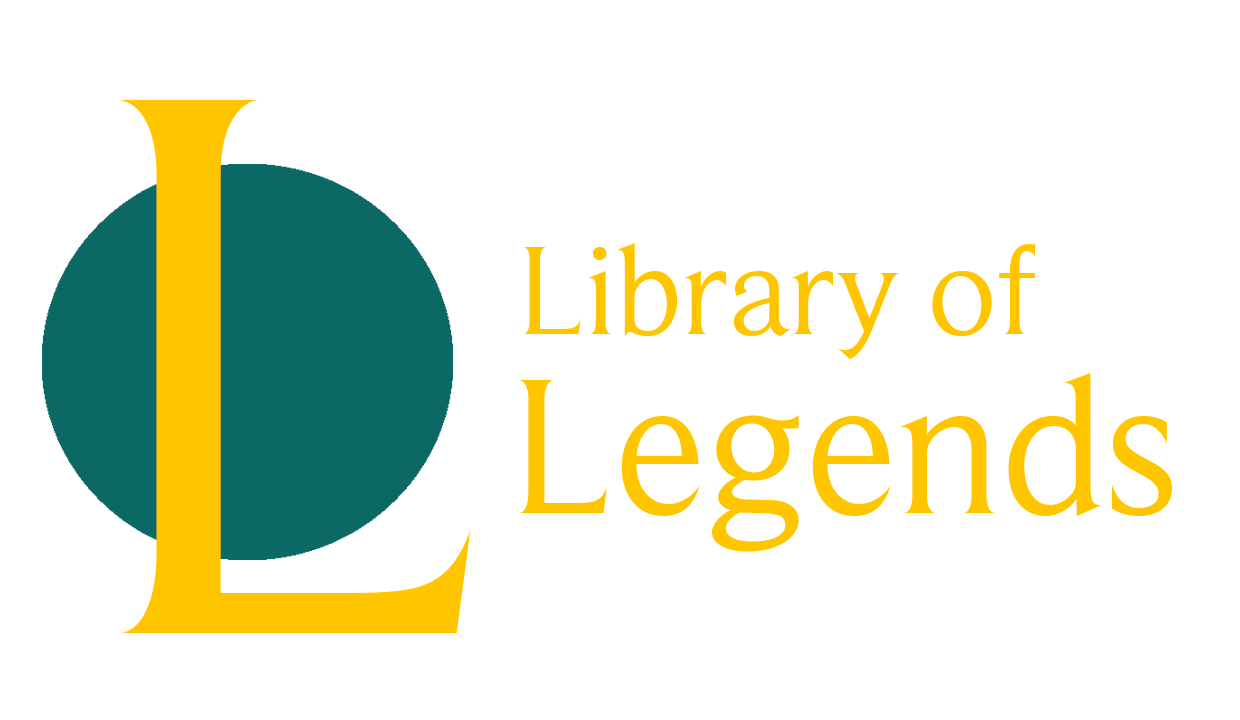
<style>
.page{position:relative;width:1240px;height:720px;background:#ffffff}
.page>*{position:absolute;margin:0}
.t1{font:800px "BeaufortforLOL-Regular";color:#ffc600}
.t2{font:130px "BeaufortforLOL-Regular";color:#ffc600}
.t3{font:200px "BeaufortforLOL-Regular";color:#ffc600}
</style>
<div class="page">
<p class="t1" style="left:119px;top:99px;width:352px;height:534px">L</p>
<p class="t2" style="left:523px;top:243px;width:512px;height:116px">Library of</p>
<p class="t3" style="left:519px;top:372px;width:653px;height:180px">Legends</p>
</div>
